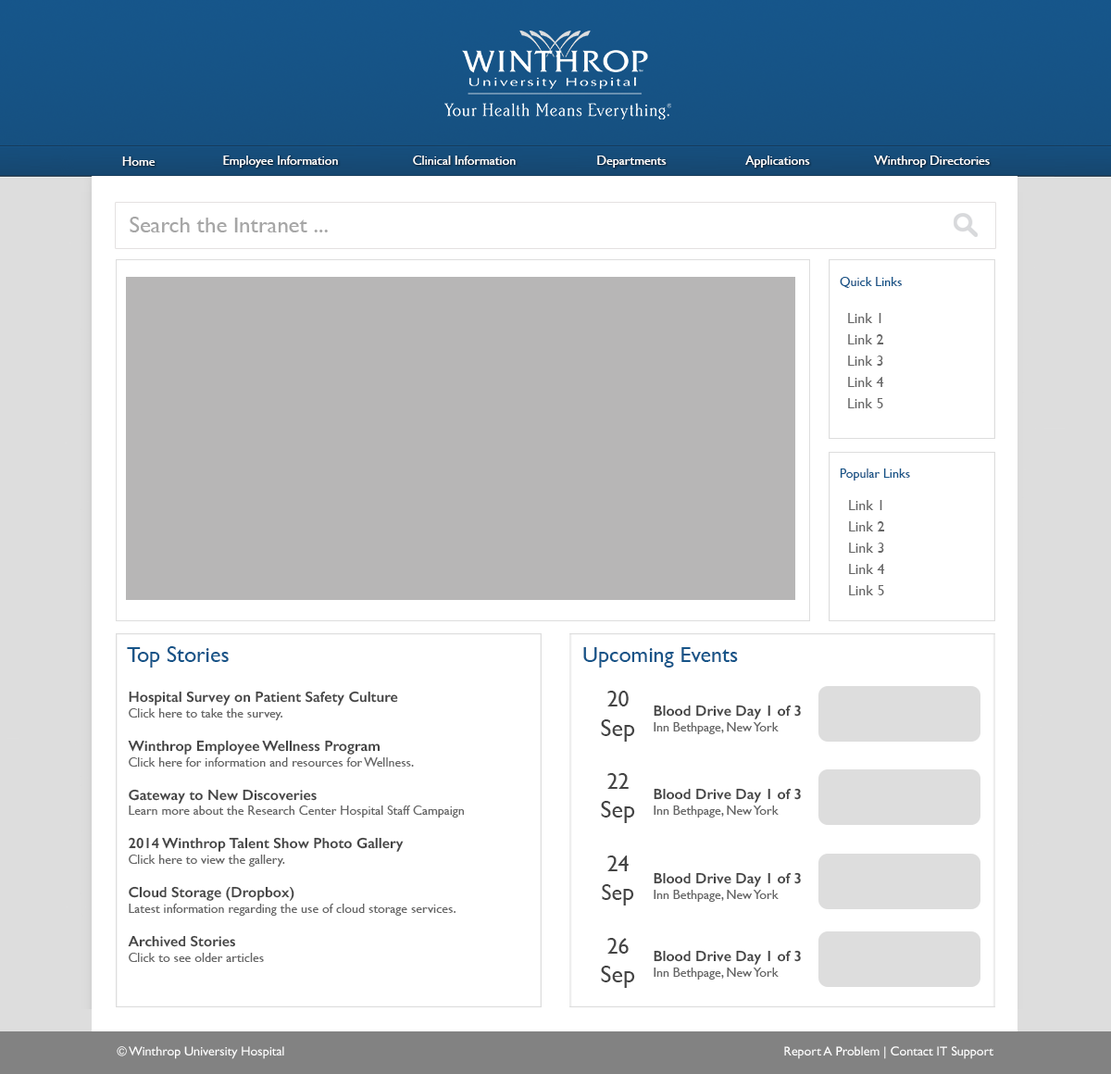
<style>
.page{position:relative;width:1111px;height:1074px;background:#ffffff}
.page>*{position:absolute;margin:0}
.t1{font:13px "GillSans";color:#ffffff}
.t2{font:22.2px "GillSans";color:#a6a6a6;scale:1.03 1}
.t3{font:13px "GillSans";color:#165488}
.t4{font:14.8px/21.3px "GillSans";color:#666666}
.t5{font:22.2px "GillSans";color:#165488}
.t6{font:13px "GillSans";color:#666666}
.t7{font:14.8px "GillSans-SemiBold";color:#444444}
.t8{font:22.2px "GillSans";color:#444444}
.t9{font:24.1px "GillSans";color:#444444}
</style>
<div class="page">
<p class="t1" style="left:122px;top:156px;width:33px;height:10px">Home</p>
<p class="t1" style="left:223px;top:155px;width:115px;height:13px">Employee Information</p>
<p class="t1" style="left:413px;top:155px;width:103px;height:10px">Clinical Information</p>
<p class="t1" style="left:597px;top:155px;width:69px;height:13px">Departments</p>
<p class="t1" style="left:745px;top:155px;width:65px;height:13px">Applications</p>
<p class="t1" style="left:874px;top:155px;width:115px;height:13px">Winthrop Directories</p>
<p class="t2" style="left:130px;top:217px;width:198px;height:15px">Search the Intranet ...</p>
<p class="t3" style="left:839px;top:277px;width:62px;height:11px">Quick Links</p>
<p class="t4" style="left:848px;top:313px;width:36px;height:95px">Link 1<br>Link 2<br>Link 3<br>Link 4<br>Link 5</p>
<p class="t3" style="left:839px;top:468px;width:71px;height:12px">Popular Links</p>
<p class="t4" style="left:849px;top:500px;width:36px;height:95px">Link 1<br>Link 2<br>Link 3<br>Link 4<br>Link 5</p>
<p class="t5" style="left:127px;top:646px;width:102px;height:21px">Top Stories</p>
<p class="t5" style="left:583px;top:647px;width:155px;height:20px">Upcoming Events</p>
<p class="t6" style="left:128px;top:690px;width:336px;height:272px"><span class="t7">Hospital Survey on Patient Safety Culture<br></span>Click here to take the survey.<br><br><span class="t7">Winthrop Employee Wellness Program<br></span>Click here for information and resources for Wellness.<br><br><span class="t7">Gateway to New Discoveries<br></span>Learn more about the Research Center Hospital Staff Campaign<br><br><span class="t7">2014 Winthrop Talent Show Photo Gallery<br></span>Click here to view the gallery.<br><br><span class="t7">Cloud Storage (Dropbox) <br></span>Latest information regarding the use of cloud storage services.<br><br><span class="t7">Archived Stories<br></span>Click to see older articles</p>
<p class="t8" style="left:601px;top:690px;width:34px;height:298px;text-align:center">20<br><span class="t9">Sep<br></span><br>22<br><span class="t9">Sep<br></span><br>24<br>Se<span class="t9">p<br></span><br>26<br><span class="t9">Sep<br></span><br>28<br>Sep</p>
<p class="t7" style="left:653px;top:704px;width:148px;height:30px">Blood Drive Day 1 of 3<br><span class="t6">Inn Bethpage, New York</span></p>
<p class="t7" style="left:653px;top:788px;width:148px;height:29px">Blood Drive Day 1 of 3<br><span class="t6">Inn Bethpage, New York</span></p>
<p class="t7" style="left:653px;top:872px;width:148px;height:29px">Blood Drive Day 1 of 3<br><span class="t6">Inn Bethpage, New York</span></p>
<p class="t7" style="left:653px;top:950px;width:148px;height:29px">Blood Drive Day 1 of 3<br><span class="t6">Inn Bethpage, New York</span></p>
<p class="t1" style="left:117px;top:1046px;width:876px;height:13px">© Winthrop University Hospital                       Report A Problem | Contact IT Support</p>
</div>
